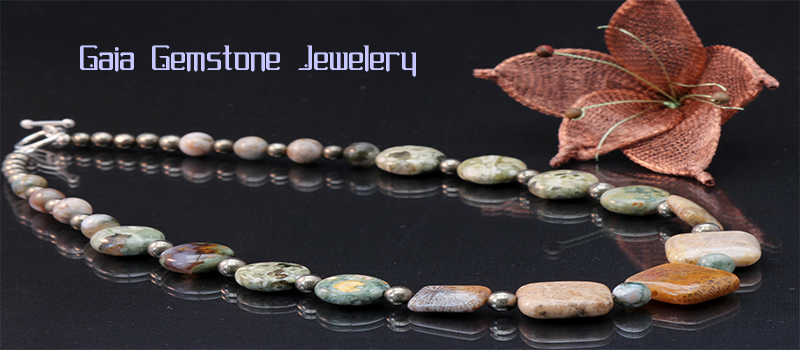
<style>
.page{position:relative;width:800px;height:350px}
.page>*{position:absolute;margin:0}
.t1{font:36px "Gemcut";color:#c7c8ff}
</style>
<div class="page">
<p class="t1" style="left:80px;top:45px;width:336px;height:32px">Gaia Gemstone Jewelery</p>
</div>
